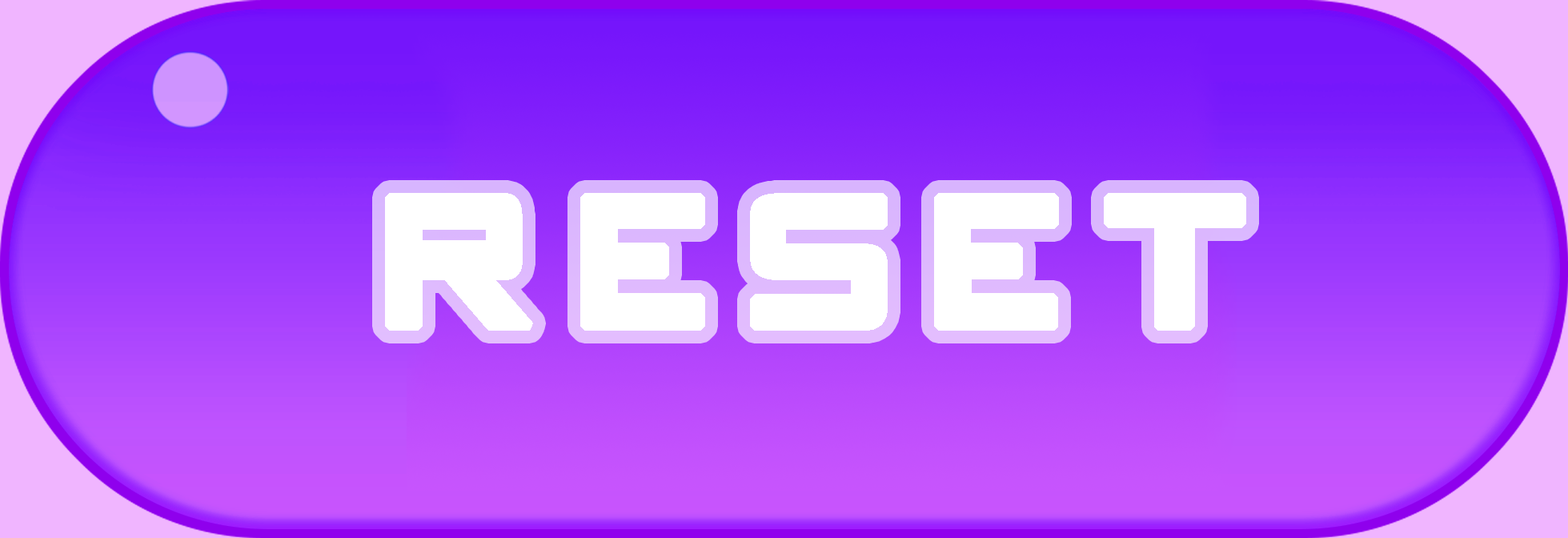
<style>
.page{position:relative;width:1568px;height:538px}
.page>*{position:absolute;margin:0}
.t1{font:160.3px "GAMECUBENDualSet";letter-spacing:0.2em;color:#ffffff;font-weight:bold;scale:0.85 1}
</style>
<div class="page">
<p class="t1" style="left:385px;top:193px;width:861px;height:138px">RESET</p>
</div>
